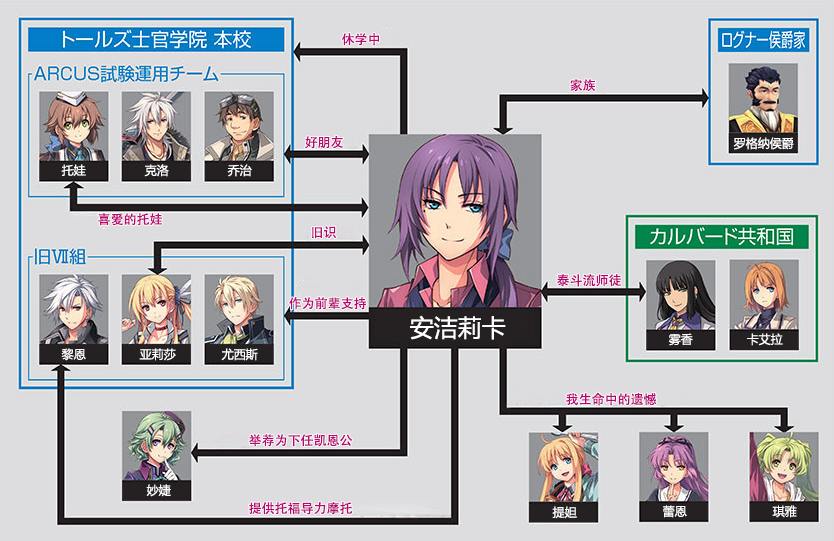
<style>
.page{position:relative;width:834px;height:541px;background:#dddddf}
.page>*{position:absolute;margin:0}
.t1{font:13px "AdobeHeitiStd-Regular";color:#b70773}
.t2{font:12px "MicrosoftYaHei";color:#ffffff}
.t3{font:24px "MicrosoftYaHei";color:#ffffff}
</style>
<div class="page">
<p class="t1" style="left:341px;top:33px;width:39px;height:13px">休学中</p>
<p class="t1" style="left:570px;top:79px;width:26px;height:13px">家族</p>
<p class="t1" style="left:305px;top:136px;width:38px;height:13px">好朋友</p>
<p class="t2" style="left:733px;top:137px;width:61px;height:13px">罗格纳侯爵</p>
<p class="t2" style="left:61px;top:164px;width:25px;height:12px">托娃</p>
<p class="t2" style="left:144px;top:164px;width:25px;height:13px">克洛</p>
<p class="t2" style="left:227px;top:164px;width:25px;height:13px">乔治</p>
<p class="t1" style="left:98px;top:213px;width:64px;height:13px">喜爱的托娃</p>
<p class="t1" style="left:312px;top:226px;width:25px;height:13px">旧识</p>
<p class="t1" style="left:557px;top:274px;width:64px;height:13px">泰斗流师徒</p>
<p class="t1" style="left:289px;top:297px;width:77px;height:13px">作为前辈支持</p>
<p class="t3" style="left:410px;top:315px;width:96px;height:25px">安洁莉卡</p>
<p class="t2" style="left:668px;top:333px;width:25px;height:13px">雾香</p>
<p class="t2" style="left:747px;top:333px;width:36px;height:13px">卡艾拉</p>
<p class="t2" style="left:61px;top:348px;width:25px;height:13px">黎恩</p>
<p class="t2" style="left:139px;top:348px;width:37px;height:13px">亚莉莎</p>
<p class="t2" style="left:221px;top:348px;width:37px;height:13px">尤西斯</p>
<p class="t1" style="left:566px;top:392px;width:91px;height:14px">我生命中的遗憾</p>
<p class="t1" style="left:249px;top:434px;width:104px;height:13px">举荐为下任凯恩公</p>
<p class="t2" style="left:146px;top:484px;width:25px;height:13px">妙婕</p>
<p class="t1" style="left:249px;top:502px;width:104px;height:13px">提供托福导力摩托</p>
<p class="t2" style="left:552px;top:506px;width:25px;height:13px">提妲</p>
<p class="t2" style="left:663px;top:505px;width:24px;height:13px">蕾恩</p>
<p class="t2" style="left:772px;top:505px;width:25px;height:13px">琪雅</p>
</div>
